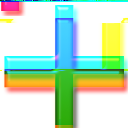
<style>
.page{position:relative;width:128px;height:128px;background:#ffffff}
.page>*{position:absolute;margin:0}
.t1{font:220px "Georgia-Bold"}
</style>
<div class="page">
<p class="t1" style="left:4px;top:3px;width:120px;height:120px">+</p>
</div>
